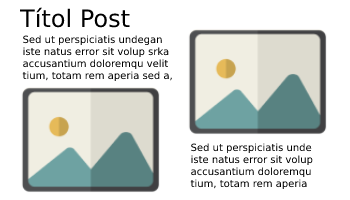
<style>
.page{position:relative;width:350px;height:200px;background:#ffffff}
.page>*{position:absolute;margin:0}
.t1{font:24px "DejaVuSans";color:#000000}
.t2{font:10px "DejaVuSans";color:#000000}
</style>
<div class="page">
<p class="t1" style="left:20px;top:7px;width:110px;height:21px">Títol Post</p>
<p class="t2" style="left:22px;top:35px;width:150px;height:47px">Sed ut perspiciatis undegan<br>iste natus error sit volup srka<br>accusantium doloremqu velit<br>tium, totam rem aperia sed a,</p>
<p class="t2" style="left:190px;top:143px;width:123px;height:47px">Sed ut perspiciatis unde<br>iste natus error sit volup<br>accusantium doloremqu<br>tium, totam rem aperia</p>
</div>
